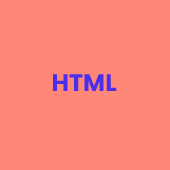
<style>
.page{position:relative;width:170px;height:170px;background:#ff8777}
.page>*{position:absolute;margin:0}
.t1{font:24px "Poppins-Bold";color:#492eec}
</style>
<div class="page">
<p class="t1" style="left:53px;top:74px;width:64px;height:17px">HTML</p>
</div>
